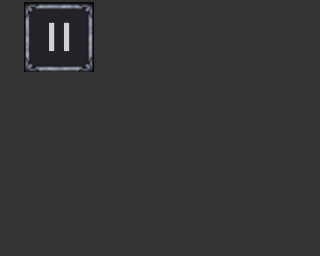
<style>
.page{position:relative;width:320px;height:256px;background:#333333}
.page>*{position:absolute;margin:0}
.t1{font:43px "UtilityBoldCondensed";color:#d2d2d3}
</style>
<div class="page">
<p class="t1" style="left:49px;top:22px;width:21px;height:30px">l l</p>
</div>
